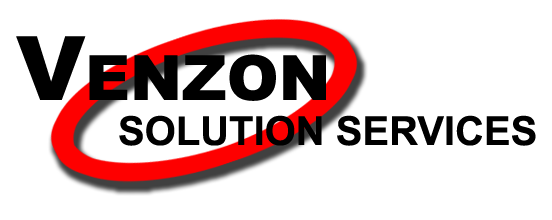
<style>
.page{position:relative;width:552px;height:220px;background:#ffffff}
.page>*{position:absolute;margin:0}
.t1{font:62.2px "Arial-Black";color:#000000}
.t2{font:88.9px "Arial-Black";color:#000000}
.t3{font:40px "Arial-BoldMT";color:#000000}
</style>
<div class="page">
<p class="t1" style="left:16px;top:36px;width:310px;height:65px"><span class="t2">V</span>ENZON</p>
<p class="t3" style="left:119px;top:115px;width:417px;height:31px">SOLUTION SERVICES</p>
</div>
